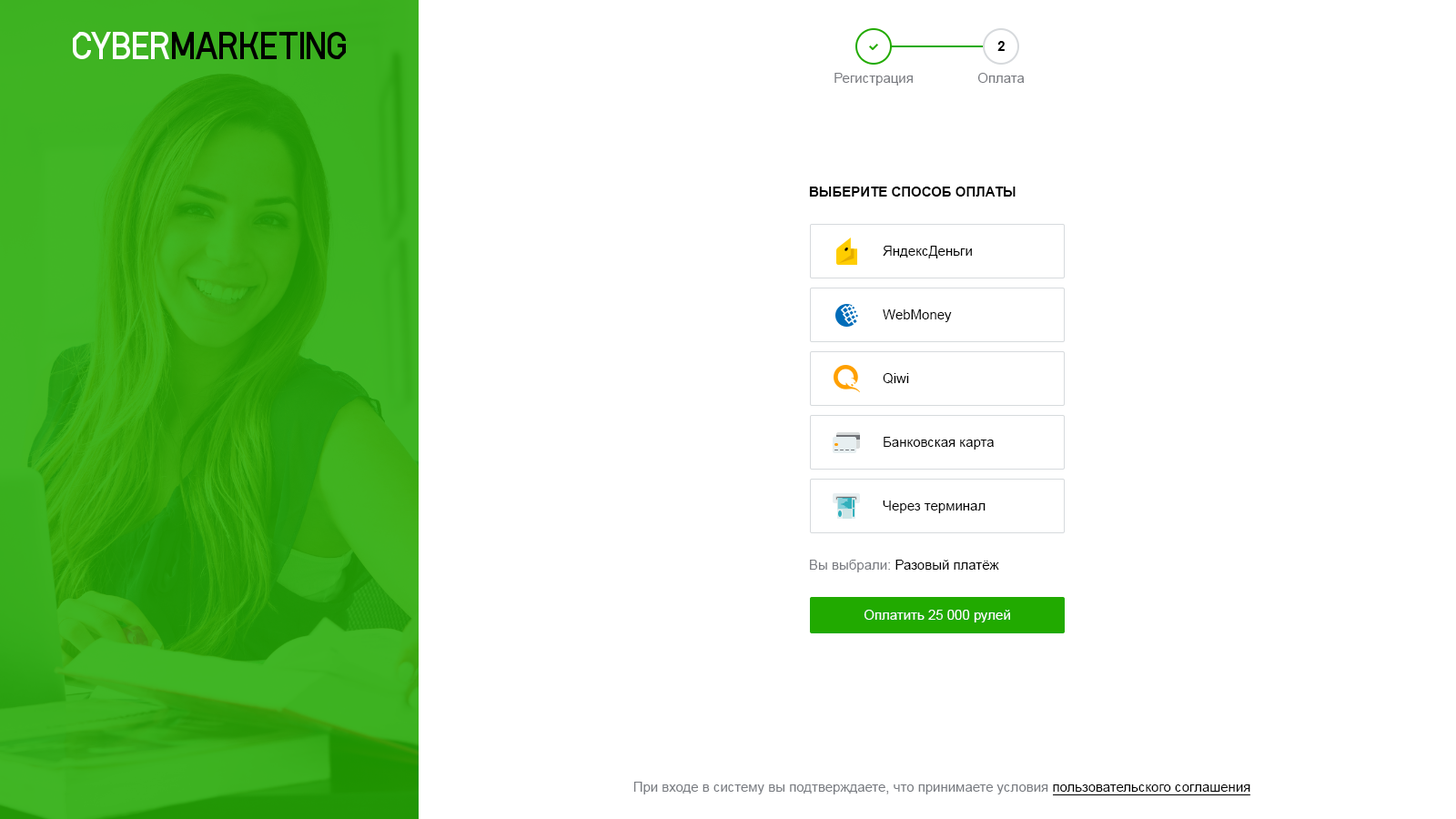
<style>
.page{position:relative;width:1456px;height:819px;background:#ffffff}
.page>*{position:absolute;margin:0}
.t1{font:13.6px "Arial-BoldMT";color:#000000;text-transform:uppercase}
.t2{font:13.6px "ArialMT";color:#787a80}
.t3{font:13.6px "ArialMT";color:#000000}
.t4{font:13.6px "ArialMT";color:#ffffff}
.t5{font:13.6px "ArialMT";color:#787b81}
</style>
<div class="page">
<p class="t1" style="left:997px;top:41px;width:8px;height:10px">2</p>
<p class="t2" style="left:834px;top:73px;width:79px;height:13px">Регистрация</p>
<p class="t2" style="left:977px;top:73px;width:48px;height:10px">Оплата</p>
<p class="t1" style="left:809px;top:187px;width:207px;height:10px">Выберите способ оплаты</p>
<p class="t3" style="left:883px;top:246px;width:89px;height:12px">ЯндексДеньги</p>
<p class="t3" style="left:883px;top:309px;width:69px;height:13px">WebMoney</p>
<p class="t3" style="left:883px;top:373px;width:26px;height:11px">Qiwi</p>
<p class="t3" style="left:884px;top:437px;width:110px;height:13px">Банковская карта</p>
<p class="t3" style="left:883px;top:500px;width:103px;height:13px">Через терминал</p>
<p class="t3" style="left:810px;top:560px;width:189px;height:12px"><span class="t2">Вы выбрали: </span>Разовый платёж</p>
<p class="t4" style="left:864px;top:610px;width:146px;height:12px">Оплатить 25 000 рулей</p>
<p class="t5" style="left:633px;top:782px;width:617px;height:12px">При входе в систему вы подтверждаете, что принимаете условия <span class="t3">пользовательского соглашения</span></p>
</div>
